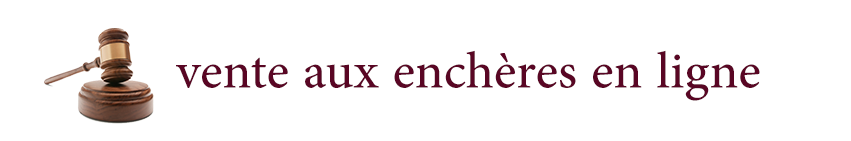
<style>
.page{position:relative;width:851px;height:141px;background:#ffffff}
.page>*{position:absolute;margin:0}
.t1{font:72px "AdobeArabic-Regular";color:#590624}
</style>
<div class="page">
<p class="t1" style="left:176px;top:50px;width:584px;height:51px">vente aux enchères en ligne</p>
</div>
